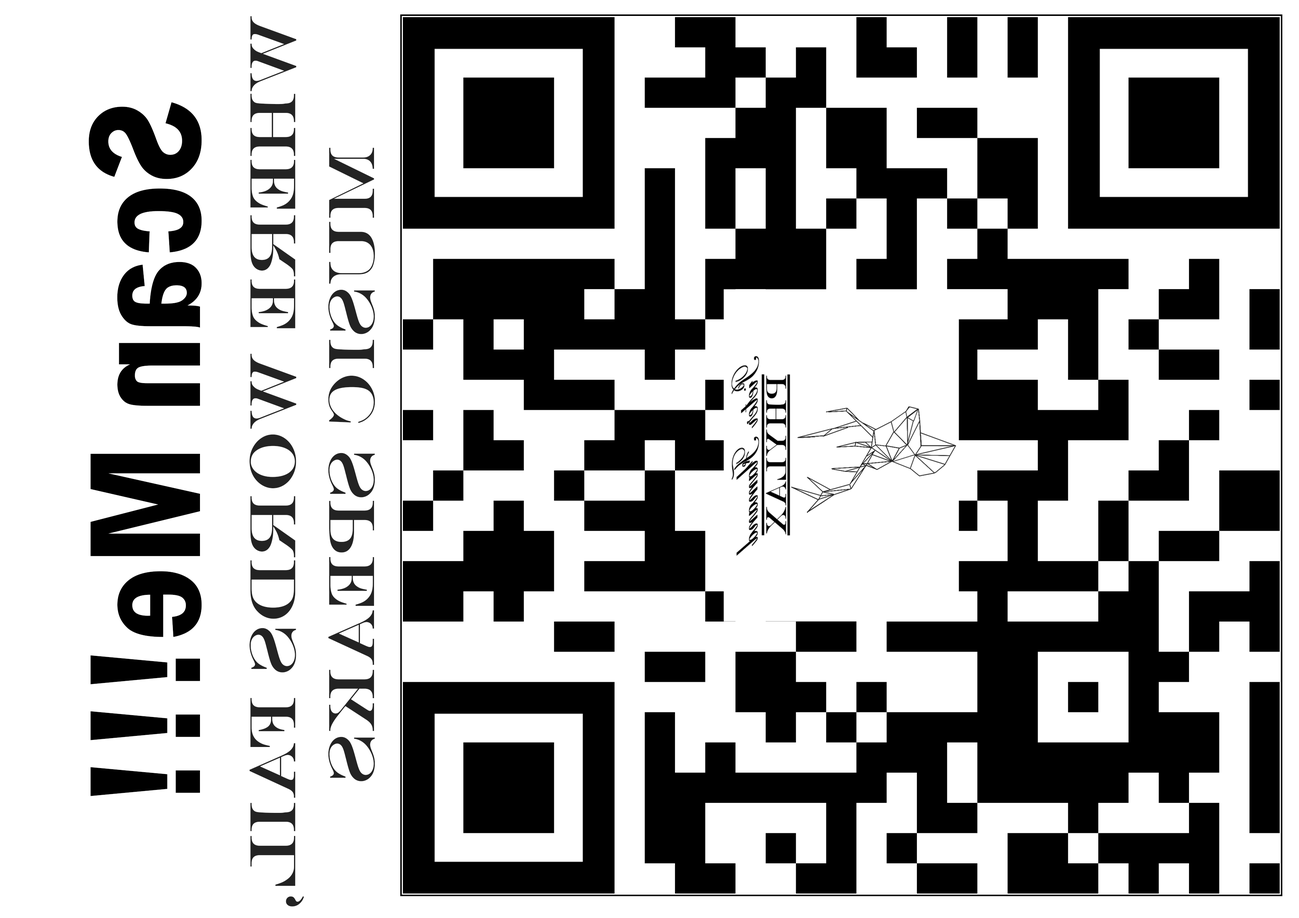
<style>
.page{position:relative;width:1299px;height:918px;background:#ffffff}
.page>*{position:absolute;margin:0}
.t1{font:65.7px "EngraversMT";color:#232323}
.t2{font:164.2px "FranklinGothic-DemiCond";color:#000000}
</style>
<div class="page">
<p class="t1" style="left:250px;top:16px;width:125px;height:891px;text-align:center;rotate:90deg">Where words fail,<br> music speaks</p>
<p class="t2" style="left:88px;top:102px;width:114px;height:694px;rotate:90deg">Scan Me!!!</p>
</div>
